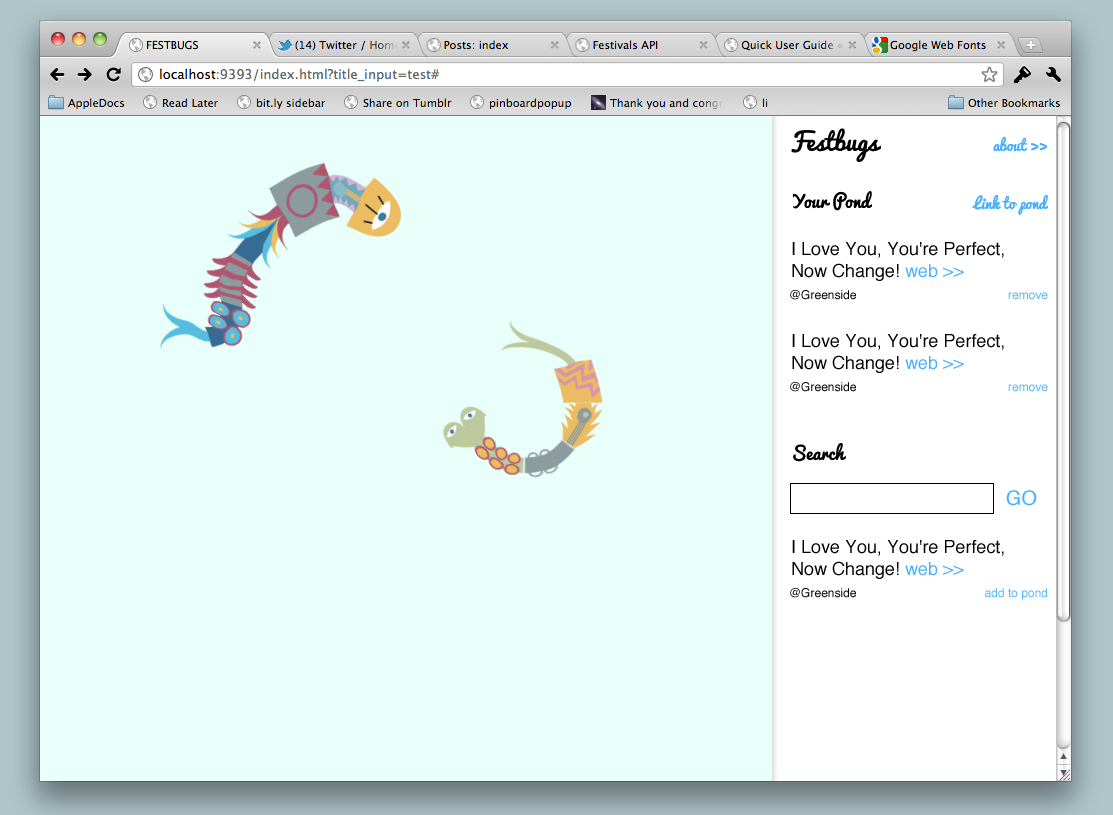
<style>
.page{position:relative;width:1113px;height:815px;background:#e8fffa}
.page>*{position:absolute;margin:0}
.t1{font:24px "Pacifico-Regular";color:#000000}
.t2{font:15px "Pacifico-Regular";color:#48afff}
.t3{font:18px "Pacifico-Regular";color:#000000}
.t4{font:18px "Helvetica";color:#000000}
.t5{font:18px "Helvetica";color:#48afff}
.t6{font:12px "Helvetica";color:#000000}
.t7{font:12px "Helvetica";color:#53b4ff}
.t8{font:20px "Helvetica";color:#48afff}
</style>
<div class="page">
<p class="t1" style="left:791px;top:128px;width:90px;height:34px">Festbugs</p>
<p class="t2" style="left:993px;top:136px;width:55px;height:16px">about &gt;&gt;</p>
<p class="t3" style="left:792px;top:191px;width:80px;height:20px">Your Pond</p>
<p class="t2" style="left:972px;top:194px;width:76px;height:21px">Link to pond</p>
<p class="t4" style="left:792px;top:242px;width:212px;height:39px">I Love You, You're Perfect,<br>Now Change! <span class="t5">web &gt;&gt;</span></p>
<p class="t6" style="left:790px;top:290px;width:66px;height:10px">@Greenside</p>
<p class="t7" style="left:1008px;top:292px;width:40px;height:8px">remove</p>
<p class="t4" style="left:792px;top:334px;width:212px;height:39px">I Love You, You're Perfect,<br>Now Change! <span class="t5">web &gt;&gt;</span></p>
<p class="t6" style="left:790px;top:382px;width:66px;height:10px">@Greenside</p>
<p class="t7" style="left:1008px;top:384px;width:40px;height:8px">remove</p>
<p class="t3" style="left:793px;top:443px;width:53px;height:19px">Search</p>
<p class="t8" style="left:1006px;top:490px;width:31px;height:16px">GO</p>
<p class="t4" style="left:792px;top:540px;width:212px;height:39px">I Love You, You're Perfect,<br>Now Change! <span class="t5">web &gt;&gt;</span></p>
<p class="t6" style="left:790px;top:588px;width:66px;height:10px">@Greenside</p>
<p class="t7" style="left:985px;top:588px;width:62px;height:12px">add to pond</p>
</div>
